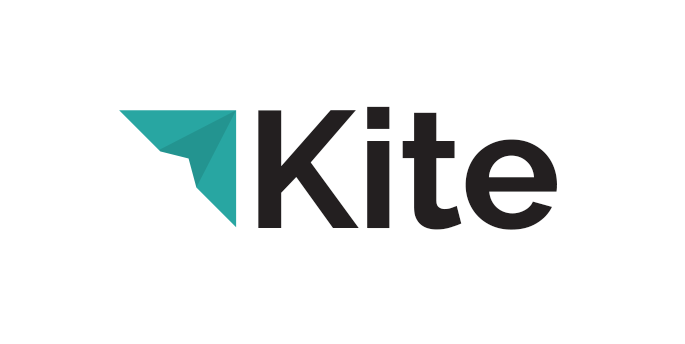
<style>
.page{position:relative;width:685px;height:344px;background:#ffffff}
.page>*{position:absolute;margin:0}
.t1{font:166.2px "Raleway-Bold";color:#231f20}
</style>
<div class="page">
<p class="t1" style="left:258px;top:106px;width:299px;height:124px">Kite</p>
</div>
